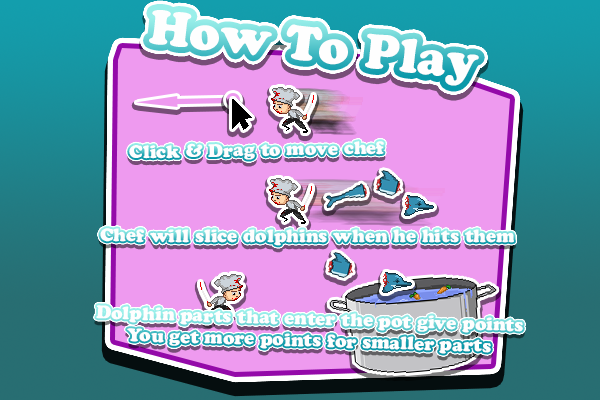
<style>
.page{position:relative;width:600px;height:400px;background:#ee9aef}
.page>*{position:absolute;margin:0}
.t1{font:48.3px "CooperBlackStd";color:#fefefe}
.t2{font:18px "CooperBlackStd";color:#fefefe}
</style>
<div class="page">
<p class="t1" style="left:149px;top:10px;width:330px;height:76px;rotate:6deg">How To Play</p>
<p class="t2" style="left:129px;top:141px;width:255px;height:19px;rotate:-1deg">Click &amp; Drag to move chef</p>
<p class="t2" style="left:100px;top:228px;width:414px;height:18px">Chef will slice dolphins when he hits them</p>
<p class="t2" style="left:96px;top:305px;width:427px;height:49px;text-align:center;rotate:2deg">Dolphin parts that enter the pot give points<br>You get more points for smaller parts</p>
</div>
